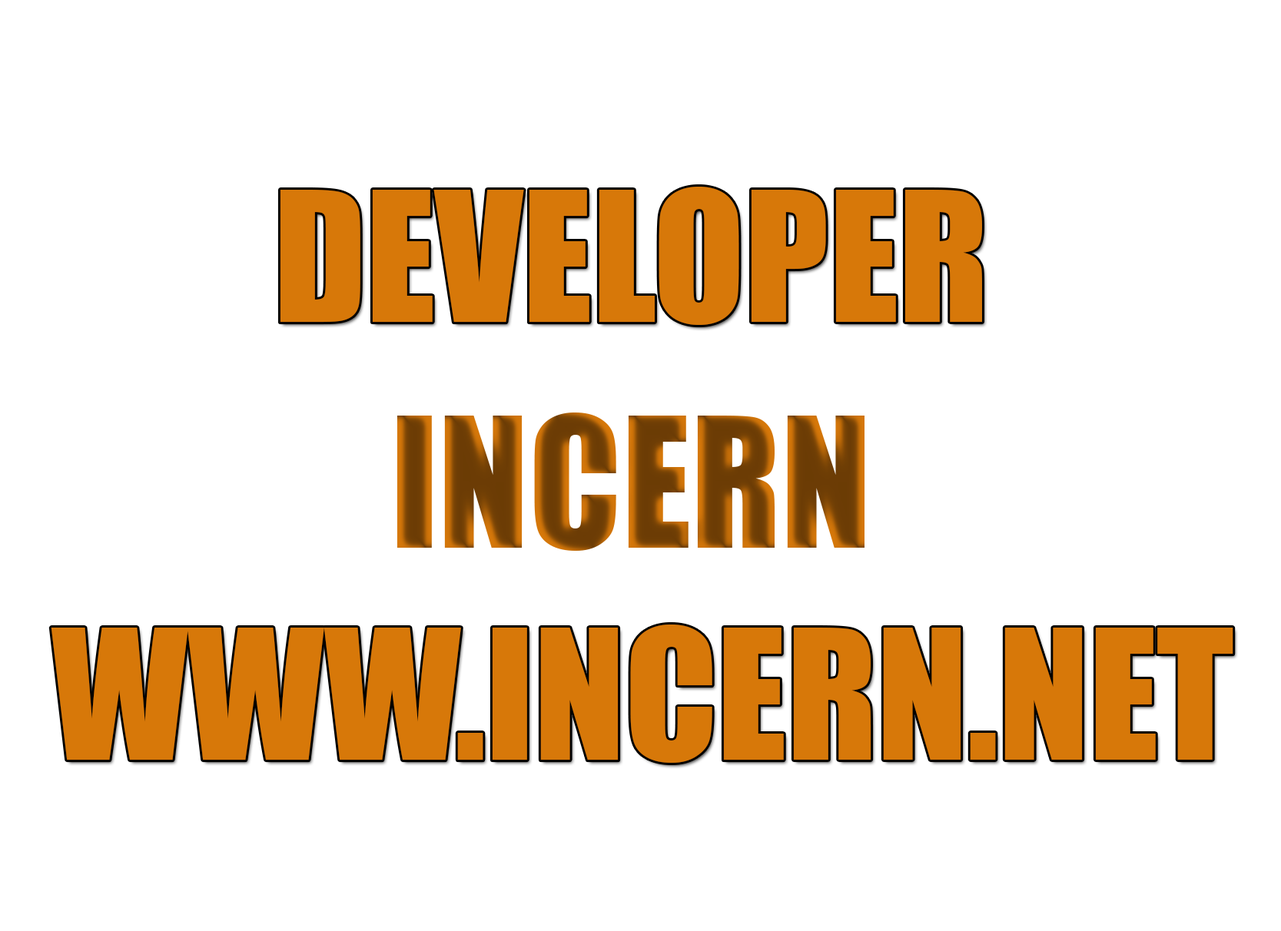
<style>
.page{position:relative;width:1281px;height:931px;background:#ffffff}
.page>*{position:absolute;margin:0}
.t1{font:167.3px "Impact";color:#d77809}
.t2{font:167.3px "Impact"}
</style>
<div class="page">
<p class="t1" style="left:280px;top:187px;width:702px;height:138px">DEVELOPER</p>
<p class="t2" style="left:396px;top:413px;width:468px;height:138px">INCERN</p>
<p class="t1" style="left:51px;top:625px;width:1182px;height:138px">WWW.INCERN.NET</p>
</div>
